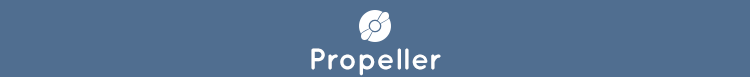
<style>
.page{position:relative;width:750px;height:77px;background:#506e90}
.page>*{position:absolute;margin:0}
.t1{font:30px "Quicksand-Bold";color:#ffffff}
</style>
<div class="page">
<p class="t1" style="left:311px;top:48px;width:130px;height:28px">Propeller</p>
</div>
